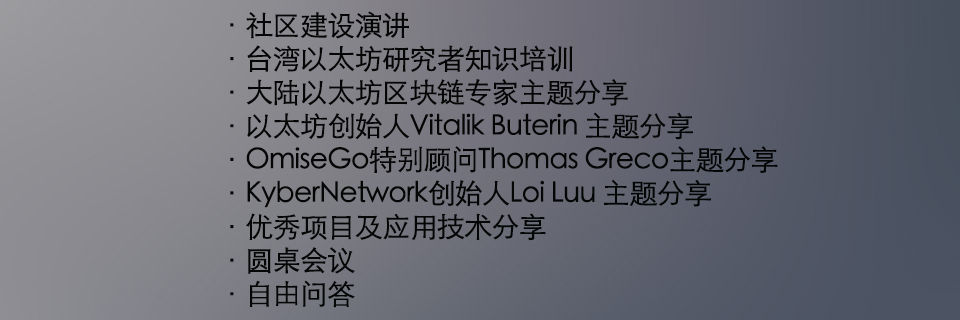
<style>
.page{position:relative;width:960px;height:320px}
.page>*{position:absolute;margin:0}
.t1{font:28px "STHeitiSC-Light";letter-spacing:-0.05em;color:#040505;font-weight:bold}
</style>
<div class="page">
<p class="t1" style="left:230px;top:11px;width:548px;height:297px">·社区建设演讲<br>·台湾以太坊研究者知识培训<br>·大陆以太坊区块链专家主题分享<br>·以太坊创始人Vitalik Buterin 主题分享<br>·OmiseGo特别顾问Thomas Greco主题分享<br>·KyberNetwork创始人Loi Luu 主题分享<br>·优秀项目及应用技术分享<br>·圆桌会议<br>·自由问答</p>
</div>
